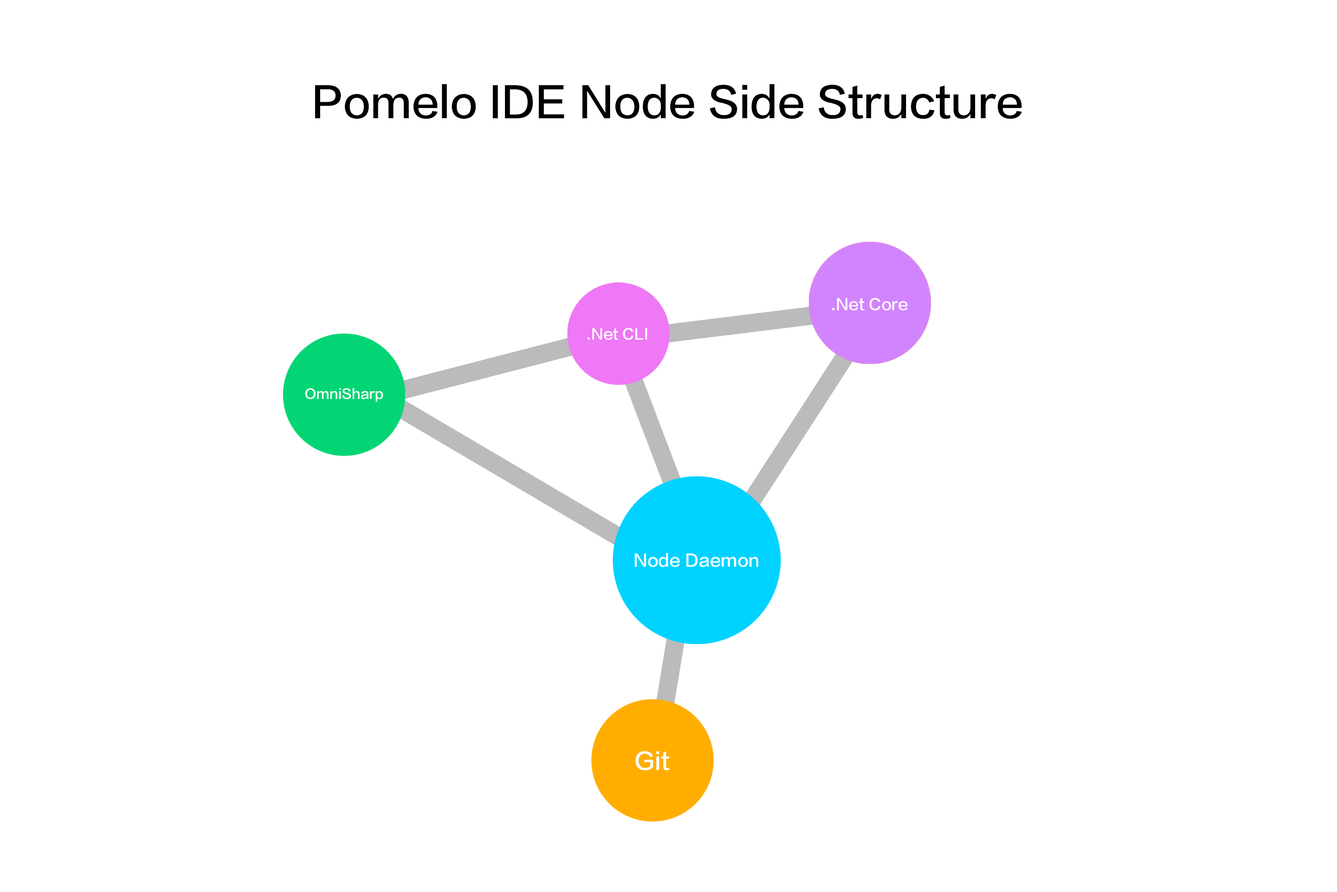
<style>
.page{position:relative;width:1337px;height:892px;background:#ffffff}
.page>*{position:absolute;margin:0}
.t1{font:41.4px "FZLTZHK--GBK1-0";color:#000000}
.t2{font:15.3px "FZLTZHK--GBK1-0";color:#ffffff}
.t3{font:14.5px "FZLTZHK--GBK1-0";color:#ffffff}
.t4{font:13.2px "FZLTZHK--GBK1-0";color:#ffffff}
.t5{font:16.6px "FZLTZHK--GBK1-0";color:#ffffff}
.t6{font:23.2px "FZLTZHK--GBK1-0";color:#ffffff}
</style>
<div class="page">
<p class="t1" style="left:315px;top:84px;width:707px;height:35px">Pomelo IDE Node Side Structure</p>
<p class="t2" style="left:832px;top:297px;width:76px;height:13px">.Net Core</p>
<p class="t3" style="left:588px;top:328px;width:59px;height:12px">.Net CLI</p>
<p class="t4" style="left:305px;top:388px;width:78px;height:14px">OmniSharp</p>
<p class="t5" style="left:635px;top:553px;width:124px;height:14px">Node Daemon</p>
<p class="t6" style="left:636px;top:751px;width:34px;height:19px">Git</p>
</div>
